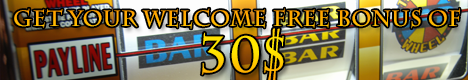
<style>
.page{position:relative;width:468px;height:80px}
.page>*{position:absolute;margin:0}
.t1{font:22.3px/38px "CharlemagneStd-Bold";letter-spacing:0.02em;scale:0.95 1}
.t2{font:50.9px/46px "CharlemagneStd-Bold";letter-spacing:0.02em;scale:0.95 1}
</style>
<div class="page">
<p class="t1" style="left:14px;top:8px;width:446px;height:73px;text-align:center">GET YOUR WELCOME FREE BONUS OF<br><span class="t2"> 30$</span></p>
</div>
